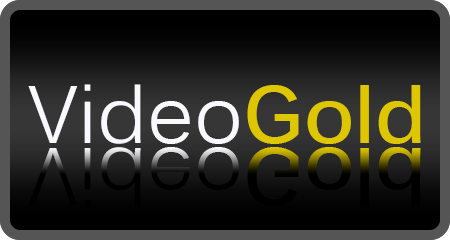
<style>
.page{position:relative;width:450px;height:240px}
.page>*{position:absolute;margin:0}
.t1{font:80px "Kalinga";color:#f9f8fd}
.t2{font:80px "Kalinga-Bold";color:#dec600}
.t3{font:80px "Kalinga"}
.t4{font:80px "Kalinga-Bold"}
</style>
<div class="page">
<p class="t1" style="left:28px;top:84px;width:393px;height:60px">Video<span class="t2">Gold</span></p>
<p class="t3" style="left:28px;top:147px;width:393px;height:60px">Video<span class="t4">Gold</span></p>
</div>
